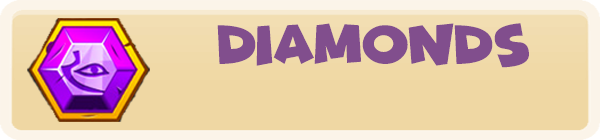
<style>
.page{position:relative;width:600px;height:140px;background:#efd7a3}
.page>*{position:absolute;margin:0}
.t1{font:56.9px "Funhouse";color:#8a419a}
</style>
<div class="page">
<p class="t1" style="left:217px;top:23px;width:312px;height:45px">Diamonds</p>
</div>
